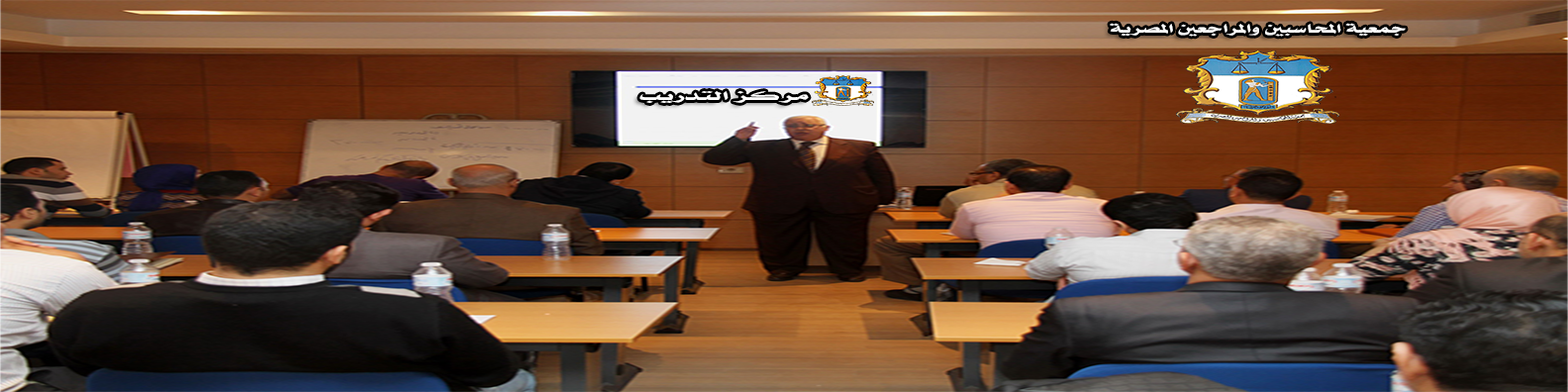
<style>
.page{position:relative;width:1568px;height:392px}
.page>*{position:absolute;margin:0}
.t1{font:14px "Sultan-bold";color:#fefefe;scale:2.06 1}
.t2{font:14px "Sultan-bold";color:#fefefe;scale:2.69 1}
</style>
<div class="page">
<p class="t1" style="left:1110px;top:23px;width:296px;height:14px">جمعية المحاسبين والمراجعين المصرية</p>
<p class="t2" style="left:639px;top:91px;width:170px;height:12px">مركز التدريب</p>
</div>
